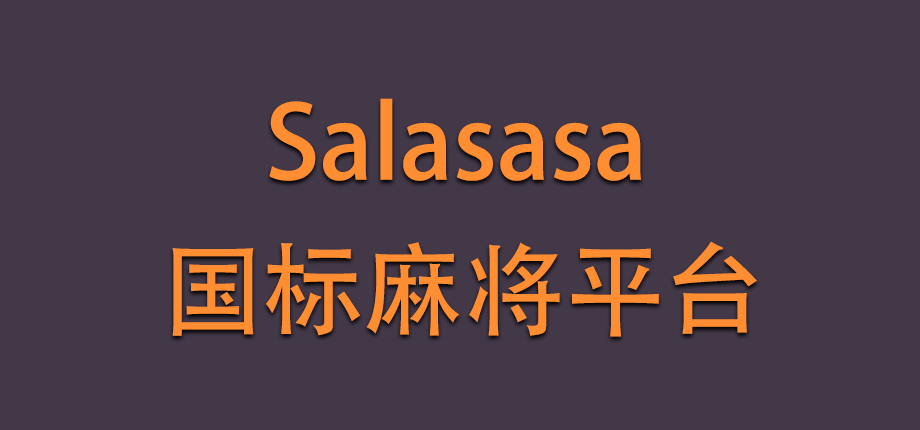
<style>
.page{position:relative;width:920px;height:430px;background:#433848}
.page>*{position:absolute;margin:0}
.t1{font:100.7px "AdobeHeitiStd-Regular";color:#ff8e32}
</style>
<div class="page">
<p class="t1" style="left:269px;top:98px;width:372px;height:83px">Salasasa</p>
<p class="t1" style="left:172px;top:241px;width:585px;height:96px">国标麻将平台</p>
</div>
